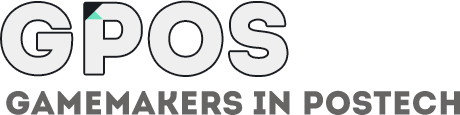
<style>
.page{position:relative;width:460px;height:115px;background:#ffffff}
.page>*{position:absolute;margin:0}
.t1{font:33.2px "Intro";color:#676464}
</style>
<div class="page">
<p class="t1" style="left:6px;top:90px;width:454px;height:25px">gamemakers in postech</p>
</div>
